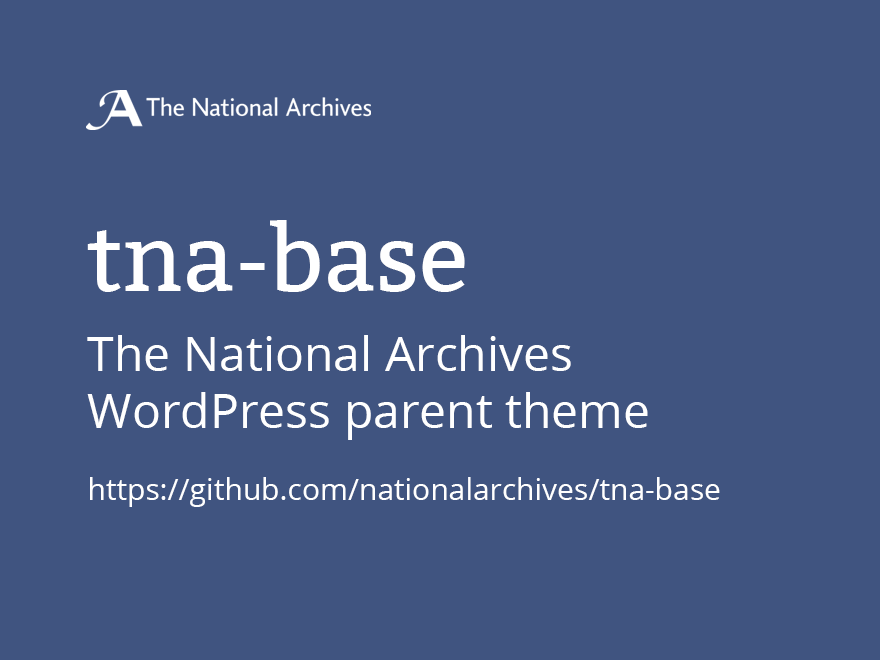
<style>
.page{position:relative;width:880px;height:660px;background:#405480}
.page>*{position:absolute;margin:0}
.t1{font:92px "Bitter-Regular";color:#ffffff}
.t2{font:48px "OpenSans";color:#ffffff}
.t3{font:30px "OpenSans";color:#ffffff}
</style>
<div class="page">
<p class="t1" style="left:87px;top:220px;width:378px;height:72px">tna-base</p>
<p class="t2" style="left:87px;top:335px;width:633px;height:172px">The National Archives <br>WordPress parent theme<br><span class="t3"><br>https://github.com/nationalarchives/tna-base</span></p>
</div>
